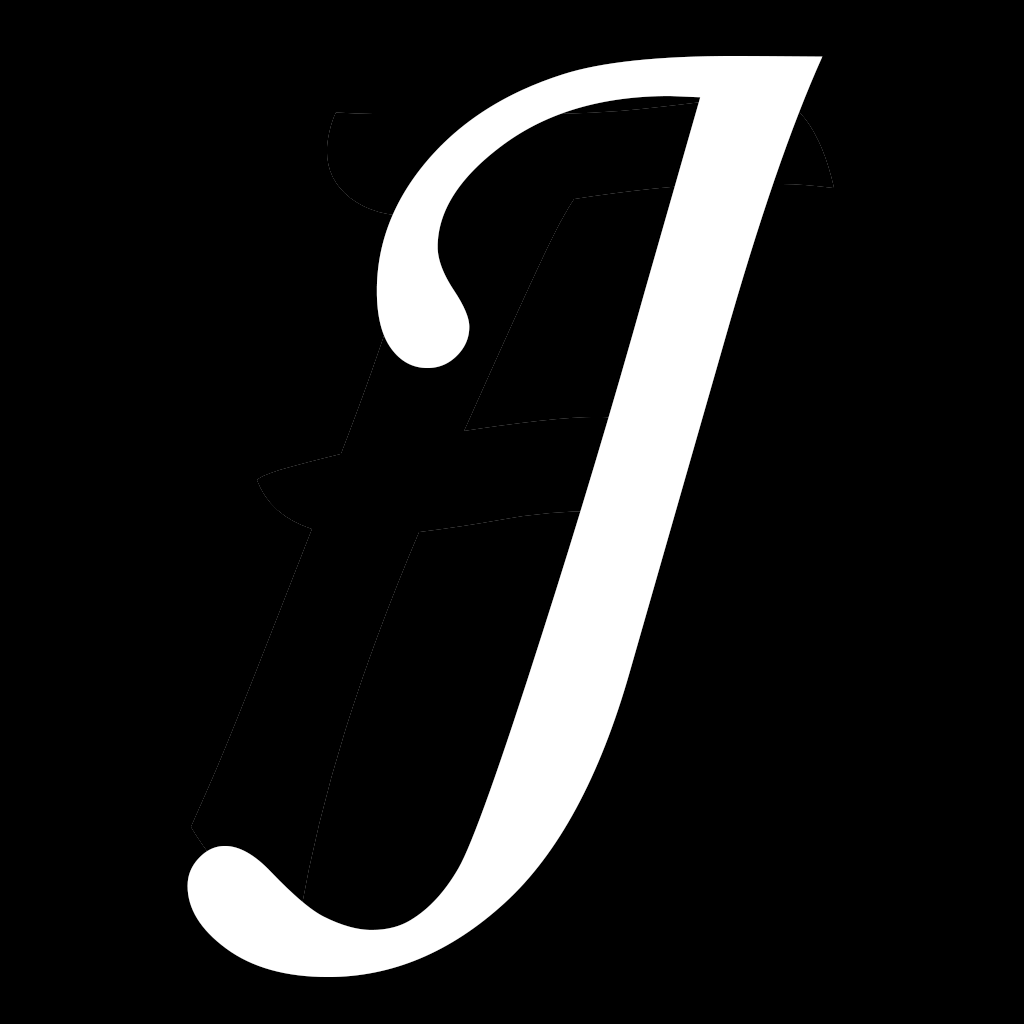
<style>
.page{position:relative;width:1024px;height:1024px;background:#000000}
.page>*{position:absolute;margin:0}
.t1{font:1296px "MonotypeCorsiva";letter-spacing:-0.01em;color:#ffffff}
</style>
<div class="page">
<p class="t1" style="left:187px;top:56px;width:636px;height:921px">J</p>
</div>
